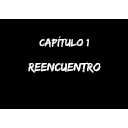
<style>
.page{position:relative;width:128px;height:128px;background:#000000}
.page>*{position:absolute;margin:0}
.t1{font:10.7px "EdoSZ";color:#ffffff;scale:1.05 1}
.t2{font:12.3px "EdoSZ";color:#ffffff}
</style>
<div class="page">
<p class="t1" style="left:39px;top:36px;width:50px;height:12px">Capítulo 1</p>
<p class="t2" style="left:28px;top:62px;width:73px;height:11px">Reencuentro</p>
</div>
